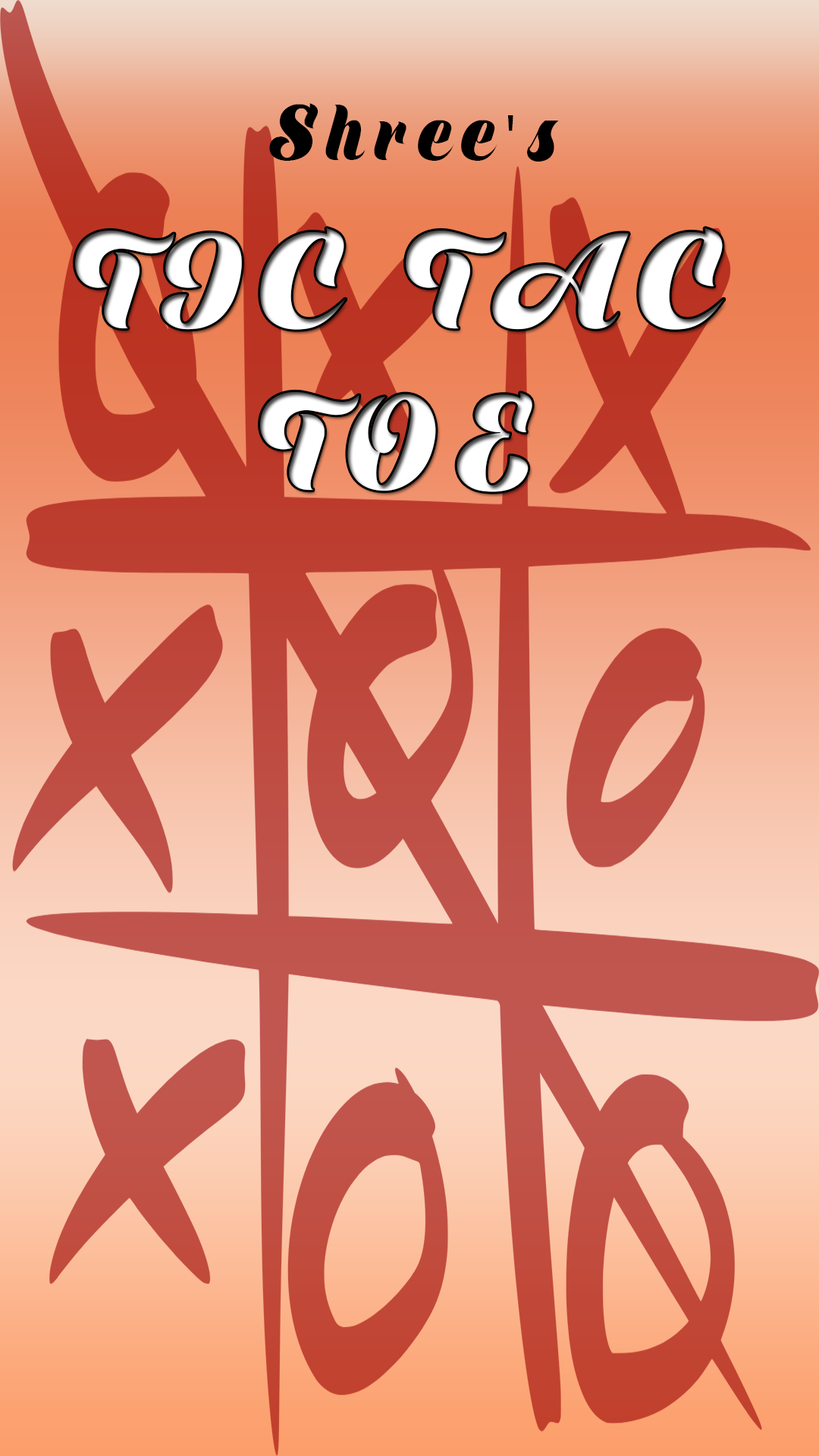
<style>
.page{position:relative;width:819px;height:1456px}
.page>*{position:absolute;margin:0}
.t1{font:64.9px "ShinePersonalUse";letter-spacing:0.18em;color:#000000;scale:0.92 1}
.t2{font:64.9px "MyriadPro-Regular";letter-spacing:0.18em;color:#000000;scale:0.92 1}
.t3{font:111.6px/162px "ShinePersonalUse";letter-spacing:0.18em;color:#ffffff;scale:0.92 1}
</style>
<div class="page">
<p class="t1" style="left:269px;top:103px;width:290px;height:59px">Shree<span class="t2">'</span>s</p>
<p class="t3" style="left:75px;top:228px;width:649px;height:264px;text-align:center">TIC TAC TOE</p>
</div>
